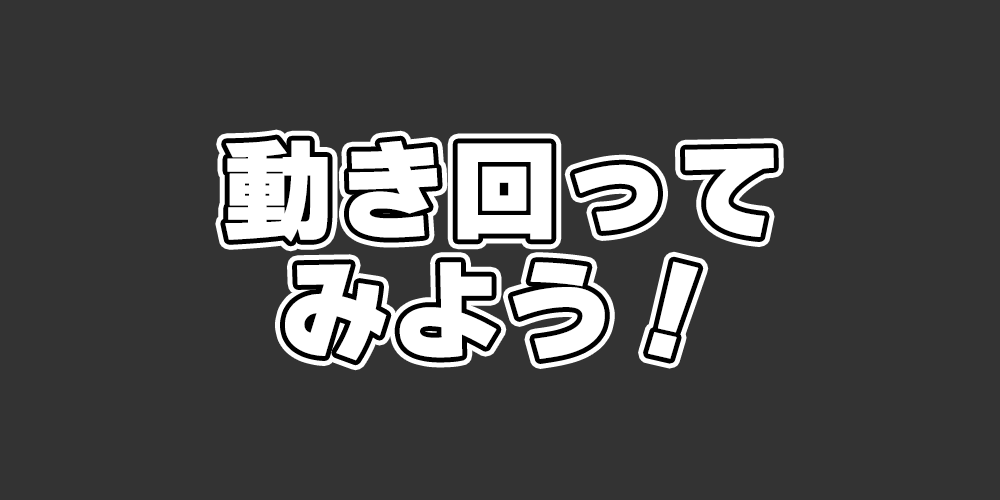
<style>
.page{position:relative;width:1000px;height:500px;background:#333333}
.page>*{position:absolute;margin:0}
.t1{font:110px/120px "WanpakuRuika-08";color:#ffffff;font-weight:bold}
</style>
<div class="page">
<p class="t1" style="left:225px;top:139px;width:549px;height:222px;text-align:center">動き回って<br>みよう！</p>
</div>
